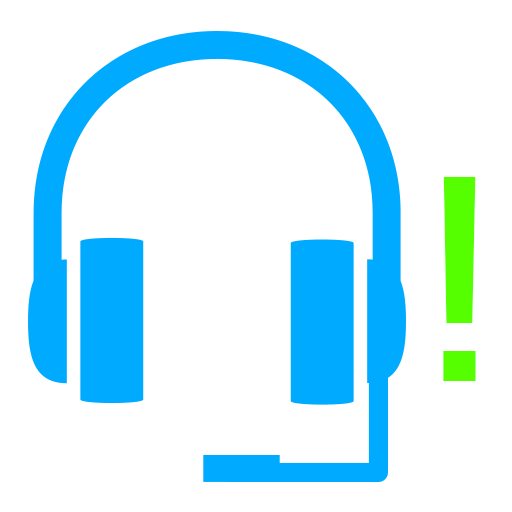
<style>
.page{position:relative;width:512px;height:512px;background:#ffffff}
.page>*{position:absolute;margin:0}
.t1{font:256.3px "HCRDotum-Bold";color:#55ff00}
</style>
<div class="page">
<p class="t1" style="left:443px;top:176px;width:33px;height:205px">!</p>
</div>
